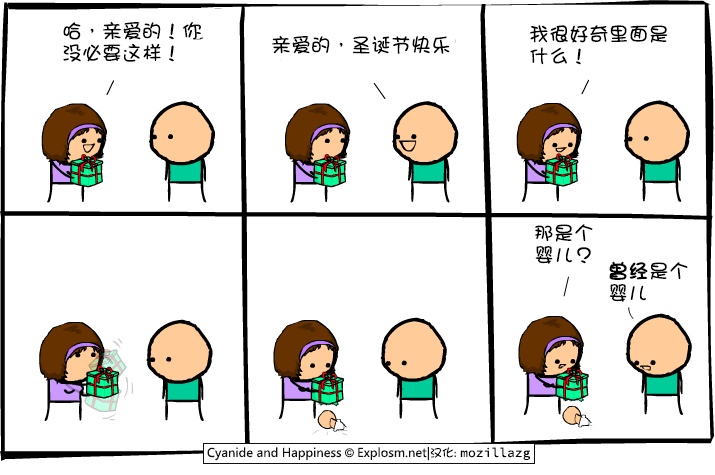
<style>
.page{position:relative;width:715px;height:475px;background:#ffffff}
.page>*{position:absolute;margin:0}
.t1{font:20px/22px "DFGirl";color:#000000}
.t2{font:20px "DFGirl";color:#000000}
.t3{font:20px/22px "DFGirl";color:#000000;font-weight:bold}
</style>
<div class="page">
<p class="t1" style="left:63px;top:21px;width:138px;height:41px">哈，亲爱的！你<br>没必要这样！</p>
<p class="t1" style="left:529px;top:25px;width:139px;height:40px">我很好奇里面是<br>什么！</p>
<p class="t2" style="left:271px;top:35px;width:179px;height:19px">亲爱的，圣诞节快乐</p>
<p class="t1" style="left:535px;top:224px;width:58px;height:40px">那是个<br>婴儿？</p>
<p class="t1" style="left:609px;top:261px;width:79px;height:41px"><span class="t3">曾经</span>是个<br>婴儿</p>
</div>
